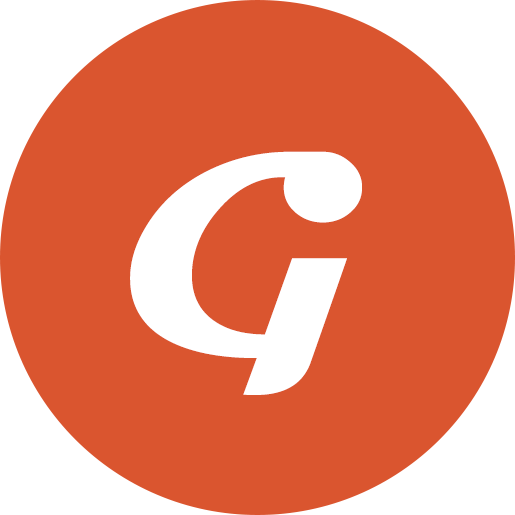
<style>
.page{position:relative;width:515px;height:515px;background:#da552f}
.page>*{position:absolute;margin:0}
.t1{font:300px "Magneto-Bold";color:#ffffff}
</style>
<div class="page">
<p class="t1" style="left:130px;top:151px;width:232px;height:244px">G</p>
</div>
